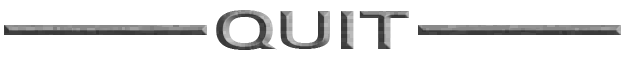
<style>
.page{position:relative;width:625px;height:60px;background:#ffffff}
.page>*{position:absolute;margin:0}
.t1{font:54px "HanzelExtendedNormal"}
</style>
<div class="page">
<p class="t1" style="left:216px;top:10px;width:193px;height:40px">QUIT</p>
</div>
